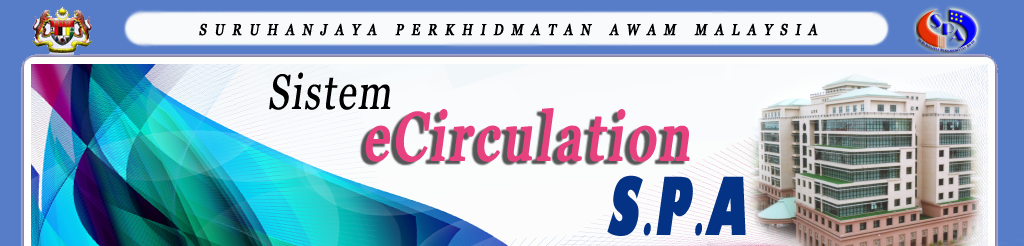
<style>
.page{position:relative;width:1024px;height:246px}
.page>*{position:absolute;margin:0}
.t1{font:15.6px "Georgia";letter-spacing:0.6em;color:#000000;font-weight:bold;font-style:italic;scale:0.82 1}
.t2{font:49.4px "Georgia";letter-spacing:0.05em;color:#000000;font-style:italic;scale:0.77 1}
.t3{font:67.6px "Georgia";letter-spacing:0.05em;color:#e84180;font-weight:bold;font-style:italic;scale:0.77 1}
.t4{font:78px "GillSans-UltraBoldCondensed";letter-spacing:0.1em;color:#043284;font-style:italic;scale:0.77 1}
.t5{font:39px "GillSans-UltraBoldCondensed";letter-spacing:0.1em;color:#043284;font-style:italic;scale:0.77 1}
</style>
<div class="page">
<p class="t1" style="left:199px;top:23px;width:619px;height:13px">SURUHANJAYA PERKHIDMATAN AWAM MALAYSIA</p>
<p class="t2" style="left:269px;top:72px;width:122px;height:38px">Sistem</p>
<p class="t3" style="left:365px;top:108px;width:325px;height:54px">eCirculation</p>
<p class="t4" style="left:607px;top:175px;width:139px;height:61px">S<span class="t5">.</span>P<span class="t5">.</span>A</p>
</div>
